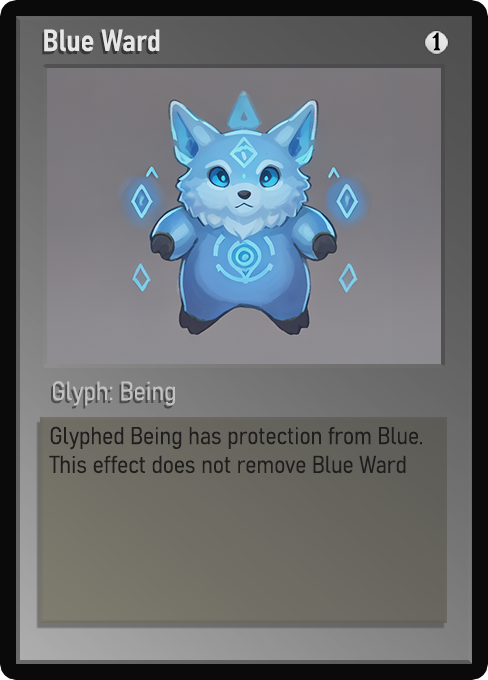
<style>
.page{position:relative;width:488px;height:680px}
.page>*{position:absolute;margin:0}
.t1{font:30px "Bahnschrift-SemiBoldSemiCondensed";color:#f2f2f2;font-weight:bold}
.t2{font:25px "WTRRoycroft";color:#000000;font-weight:bold;scale:1.09 1}
.t3{font:26px "Bahnschrift-LightSemiCondensed";color:#c8c8c8;font-weight:bold}
.t4{font:24px "Bahnschrift-LightSemiCondensed";color:#1e1e1e;font-weight:bold}
</style>
<div class="page">
<p class="t1" style="left:44px;top:29px;width:116px;height:23px;opacity:0.9">Blue Ward</p>
<p class="t2" style="left:432px;top:32px;width:9px;height:19px">1</p>
<p class="t3" style="left:53px;top:381px;width:122px;height:25px;opacity:0.9">Glyph: Being</p>
<p class="t4" style="left:49px;top:426px;width:373px;height:48px">Glyphed Being has protection from Blue. This effect does not remove Blue Ward</p>
</div>
